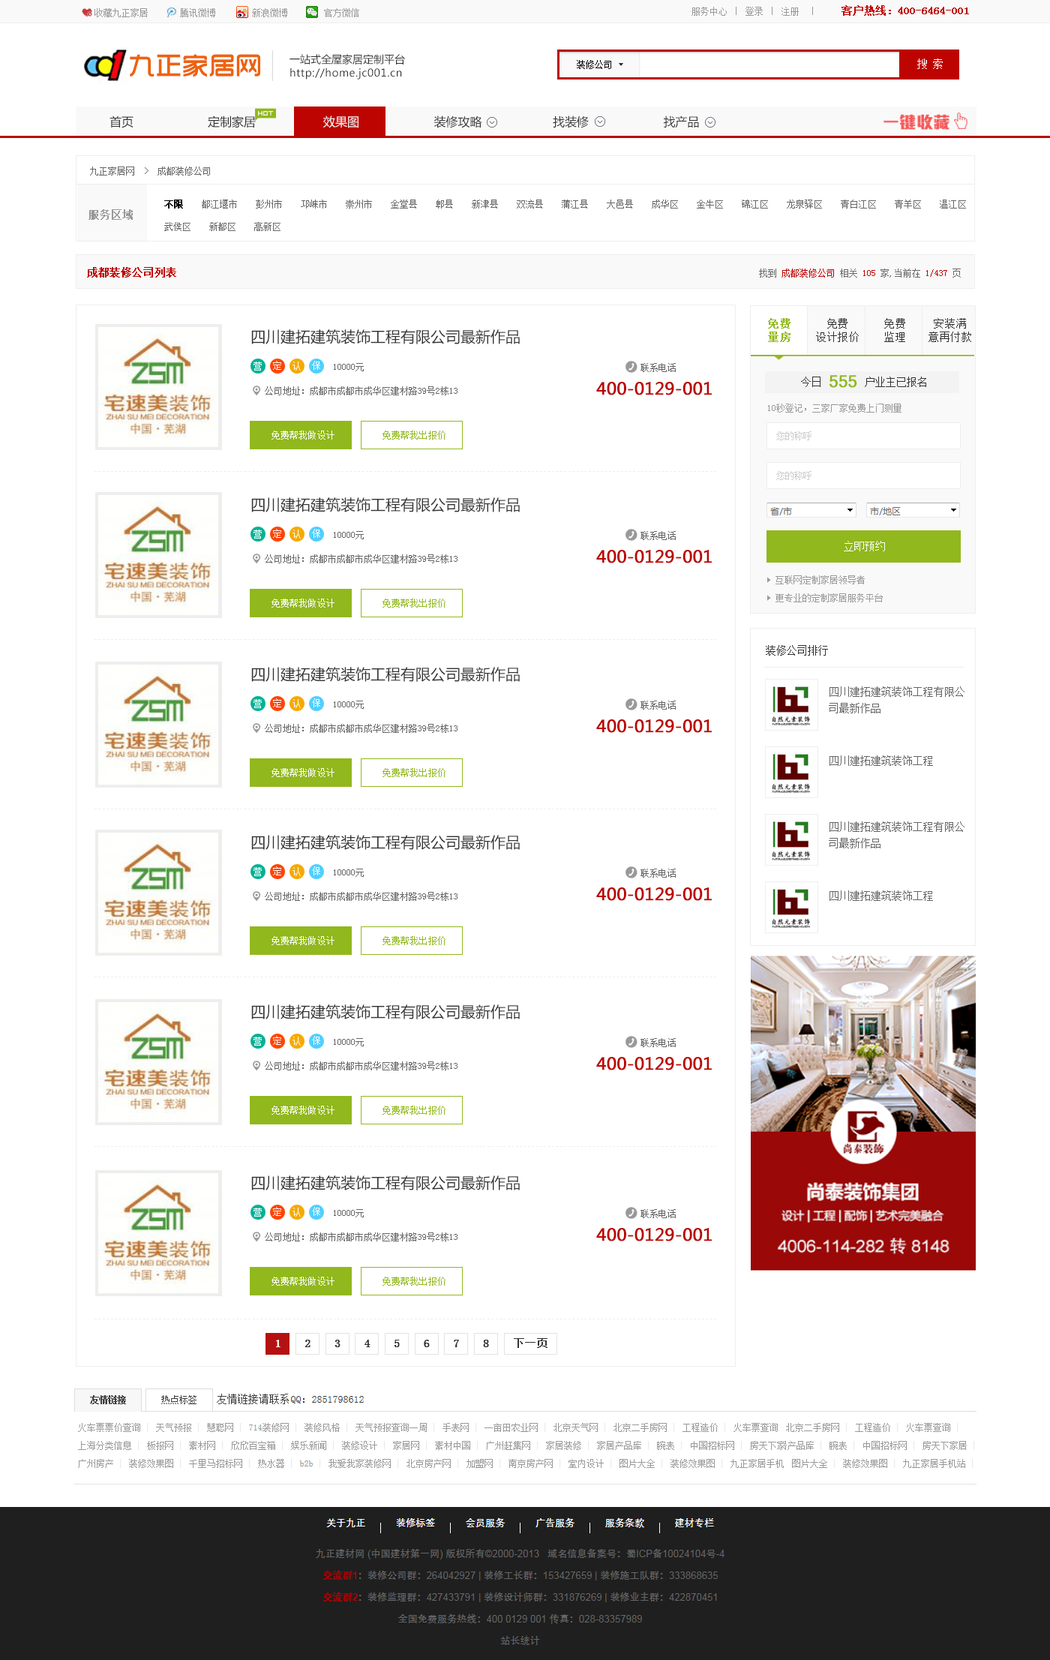
<style>
.page{position:relative;width:1050px;height:1660px;background:#ffffff}
.page>*{position:absolute;margin:0}
.t1{font:9px "NSimSun";color:#999999}
.t2{font:10.5px "NSimSun";color:#bd0400;font-weight:bold}
.t3{font:26px "TRENDS";color:#ee620d;font-weight:bold}
.t4{font:10.5px "MicrosoftYaHei";color:#333333}
.t5{font:9px "NSimSun";color:#000000}
.t6{font:10.5px "MicrosoftYaHei";letter-spacing:0.04em;color:#333333}
.t7{font:12px "MicrosoftYaHei";color:#333333}
.t8{font:12px "MicrosoftYaHei";color:#efefef}
.t9{font:9px "NSimSun";color:#666666}
.t10{font:10.5px "NSimSun";color:#999999;font-weight:bold}
.t11{font:9px/22.5px "NSimSun";color:#666666}
.t12{font:9px/22.5px "NSimSun";color:#000000;font-weight:bold}
.t13{font:9px "NSimSun";color:#bd0400}
.t14{font:10.5px/13.5px "NSimSun";letter-spacing:0.05em;color:#91b81d;font-weight:bold}
.t15{font:10.5px/13.5px "NSimSun";letter-spacing:0.05em;color:#333333}
.t16{font:15px "MicrosoftYaHei";color:#333333}
.t17{font:9px "NSimSun";letter-spacing:0.075em;color:#ffffff}
.t18{font:10.5px "NSimSun";color:#333333}
.t19{font:15.9px "Kartika";color:#91b81d;font-weight:bold}
.t20{font:16.5px "MicrosoftYaHei";color:#bc0500;font-weight:bold}
.t21{font:8.6px "NSimSun";letter-spacing:0.05em;color:#ffffff}
.t22{font:8.6px "NSimSun";letter-spacing:0.05em;color:#91b81d}
.t23{font:9px "NSimSun";color:#cccccc}
.t24{font:4.5px "NSimSun";letter-spacing:0.4em;color:#eeeeee;font-weight:bold}
.t25{font:10.5px "NSimSun";color:#ffffff}
.t26{font:9px/18px "NSimSun";color:#999999}
.t27{font:10.5px/16.5px "NSimSun";color:#666666}
.t28{font:10.5px "NSimSun";color:#666666}
</style>
<div class="page">
<p class="t1" style="left:692px;top:5px;width:277px;height:11px">服务中心 ｜ 登录 ｜ 注册  ｜     <span class="t2">客户热线：400-6464-001</span></p>
<p class="t1" style="left:94px;top:8px;width:265px;height:9px">收藏九正家居       腾讯微博        新浪微博        官方微信</p>
<p class="t3" style="left:130px;top:54px;width:130px;height:23px">九正家居网</p>
<p class="t4" style="left:290px;top:54px;width:115px;height:10px">一站式全屋家居定制平台</p>
<p class="t5" style="left:577px;top:60px;width:34px;height:9px">装修公司</p>
<p class="t6" style="left:290px;top:68px;width:112px;height:12px">http://home.jc001.cn</p>
<p class="t7" style="left:110px;top:116px;width:24px;height:12px">首页</p>
<p class="t7" style="left:208px;top:116px;width:491px;height:12px">定制家居                  <span class="t8"> 效果图</span>                     装修攻略                    找装修                     找产品</p>
<p class="t9" style="left:90px;top:166px;width:120px;height:10px">九正家居网  &gt;  成都装修公司</p>
<p class="t10" style="left:88px;top:209px;width:45px;height:11px">服务区域</p>
<p class="t11" style="left:164px;top:200px;width:802px;height:31px"><span class="t12">不限</span>    都江堰市    彭州市    邛崃市    崇州市    金堂县    郫县    新津县    双流县    蒲江县    大邑县    成华区    金牛区    锦江区    龙泉驿区    青白江区    青羊区    温江区<br>武侯区    新都区    高新区</p>
<p class="t2" style="left:87px;top:267px;width:89px;height:11px">成都装修公司列表</p>
<p class="t13" style="left:759px;top:268px;width:202px;height:10px"><span class="t9">找到 </span>成都装修公司<span class="t9"> 相关 </span>105<span class="t9"> 家,当前在 </span>1/437<span class="t9"> 页</span></p>
<p class="t14" style="left:768px;top:318px;width:22px;height:24px">免费<br>量房</p>
<p class="t15" style="left:816px;top:318px;width:43px;height:24px;text-align:center">免费<br>设计报价</p>
<p class="t15" style="left:884px;top:318px;width:21px;height:24px">免费<br>监理</p>
<p class="t15" style="left:928px;top:318px;width:43px;height:24px;text-align:center">安装满<br>意再付款</p>
<p class="t16" style="left:251px;top:329px;width:269px;height:15px">四川建拓建筑装饰工程有限公司最新作品</p>
<p class="t17" style="left:254px;top:362px;width:8px;height:8px">营</p>
<p class="t17" style="left:273px;top:361px;width:8px;height:9px">定</p>
<p class="t17" style="left:292px;top:362px;width:9px;height:8px">认</p>
<p class="t17" style="left:312px;top:361px;width:8px;height:9px">保</p>
<p class="t9" style="left:334px;top:363px;width:30px;height:8px">10000元</p>
<p class="t9" style="left:640px;top:363px;width:36px;height:9px">联系电话</p>
<p class="t18" style="left:801px;top:376px;width:125px;height:11px">今日       户业主已报名</p>
<p class="t19" style="left:830px;top:375px;width:27px;height:13px">555</p>
<p class="t9" style="left:265px;top:386px;width:193px;height:9px">公司地址：成都市成都市成华区建材路39号2栋13</p>
<p class="t20" style="left:596px;top:382px;width:116px;height:13px">400-0129-001</p>
<p class="t1" style="left:768px;top:404px;width:134px;height:8px">10秒登记，三家厂家免费上门测量</p>
<p class="t21" style="left:272px;top:430px;width:62px;height:10px">免费帮我做设计</p>
<p class="t22" style="left:382px;top:430px;width:64px;height:10px">免费帮我出报价</p>
<p class="t23" style="left:776px;top:431px;width:36px;height:9px">您的称呼</p>
<p class="t24" style="left:94px;top:471px;width:622px;height:1px">----------------------------------------------------------------------------------------------------------------------------------------------------------</p>
<p class="t23" style="left:776px;top:471px;width:36px;height:9px">您的称呼</p>
<p class="t16" style="left:251px;top:497px;width:269px;height:15px">四川建拓建筑装饰工程有限公司最新作品</p>
<p class="t17" style="left:254px;top:530px;width:8px;height:8px">营</p>
<p class="t17" style="left:273px;top:529px;width:8px;height:9px">定</p>
<p class="t17" style="left:292px;top:530px;width:9px;height:8px">认</p>
<p class="t17" style="left:312px;top:529px;width:8px;height:9px">保</p>
<p class="t9" style="left:334px;top:531px;width:30px;height:8px">10000元</p>
<p class="t9" style="left:640px;top:531px;width:36px;height:9px">联系电话</p>
<p class="t25" style="left:844px;top:541px;width:41px;height:10px">立即预约</p>
<p class="t9" style="left:265px;top:554px;width:193px;height:9px">公司地址：成都市成都市成华区建材路39号2栋13</p>
<p class="t20" style="left:596px;top:550px;width:116px;height:13px">400-0129-001</p>
<p class="t26" style="left:776px;top:575px;width:107px;height:27px">互联网定制家居领导者<br>更专业的定制家居服务平台</p>
<p class="t21" style="left:272px;top:598px;width:62px;height:10px">免费帮我做设计</p>
<p class="t22" style="left:382px;top:598px;width:64px;height:10px">免费帮我出报价</p>
<p class="t24" style="left:94px;top:639px;width:622px;height:1px">----------------------------------------------------------------------------------------------------------------------------------------------------------</p>
<p class="t18" style="left:766px;top:645px;width:62px;height:11px">装修公司排行</p>
<p class="t16" style="left:251px;top:667px;width:269px;height:15px">四川建拓建筑装饰工程有限公司最新作品</p>
<p class="t27" style="left:829px;top:686px;width:135px;height:27px">四川建拓建筑装饰工程有限公<br>司最新作品</p>
<p class="t17" style="left:254px;top:699px;width:8px;height:9px">营</p>
<p class="t17" style="left:273px;top:698px;width:8px;height:9px">定</p>
<p class="t17" style="left:292px;top:699px;width:9px;height:9px">认</p>
<p class="t17" style="left:312px;top:698px;width:8px;height:9px">保</p>
<p class="t9" style="left:334px;top:700px;width:30px;height:9px">10000元</p>
<p class="t9" style="left:640px;top:700px;width:36px;height:10px">联系电话</p>
<p class="t9" style="left:265px;top:724px;width:193px;height:9px">公司地址：成都市成都市成华区建材路39号2栋13</p>
<p class="t20" style="left:596px;top:719px;width:116px;height:14px">400-0129-001</p>
<p class="t28" style="left:830px;top:755px;width:103px;height:11px">四川建拓建筑装饰工程</p>
<p class="t21" style="left:272px;top:768px;width:62px;height:9px">免费帮我做设计</p>
<p class="t22" style="left:382px;top:768px;width:64px;height:9px">免费帮我出报价</p>
<p class="t24" style="left:94px;top:808px;width:622px;height:1px">----------------------------------------------------------------------------------------------------------------------------------------------------------</p>
<p class="t27" style="left:829px;top:821px;width:135px;height:27px">四川建拓建筑装饰工程有限公<br>司最新作品</p>
<p class="t16" style="left:251px;top:835px;width:269px;height:15px">四川建拓建筑装饰工程有限公司最新作品</p>
<p class="t17" style="left:254px;top:867px;width:8px;height:9px">营</p>
<p class="t17" style="left:273px;top:866px;width:8px;height:9px">定</p>
<p class="t17" style="left:292px;top:867px;width:9px;height:9px">认</p>
<p class="t17" style="left:312px;top:866px;width:8px;height:9px">保</p>
<p class="t9" style="left:334px;top:868px;width:30px;height:9px">10000元</p>
<p class="t9" style="left:640px;top:868px;width:36px;height:10px">联系电话</p>
<p class="t9" style="left:265px;top:892px;width:193px;height:9px">公司地址：成都市成都市成华区建材路39号2栋13</p>
<p class="t20" style="left:596px;top:887px;width:116px;height:14px">400-0129-001</p>
<p class="t28" style="left:830px;top:890px;width:103px;height:11px">四川建拓建筑装饰工程</p>
<p class="t21" style="left:272px;top:936px;width:62px;height:9px">免费帮我做设计</p>
<p class="t22" style="left:382px;top:936px;width:64px;height:9px">免费帮我出报价</p>
<p class="t24" style="left:94px;top:976px;width:622px;height:1px">----------------------------------------------------------------------------------------------------------------------------------------------------------</p>
<p class="t16" style="left:251px;top:1004px;width:269px;height:15px">四川建拓建筑装饰工程有限公司最新作品</p>
<p class="t17" style="left:254px;top:1036px;width:8px;height:10px">营</p>
<p class="t17" style="left:273px;top:1036px;width:8px;height:9px">定</p>
<p class="t17" style="left:292px;top:1036px;width:9px;height:10px">认</p>
<p class="t17" style="left:312px;top:1036px;width:8px;height:9px">保</p>
<p class="t9" style="left:334px;top:1038px;width:30px;height:8px">10000元</p>
<p class="t9" style="left:640px;top:1038px;width:36px;height:9px">联系电话</p>
<p class="t9" style="left:265px;top:1061px;width:193px;height:9px">公司地址：成都市成都市成华区建材路39号2栋13</p>
<p class="t20" style="left:596px;top:1057px;width:116px;height:13px">400-0129-001</p>
<p class="t21" style="left:272px;top:1106px;width:62px;height:8px">免费帮我做设计</p>
<p class="t22" style="left:382px;top:1106px;width:64px;height:8px">免费帮我出报价</p>
<p class="t24" style="left:94px;top:1146px;width:622px;height:1px">----------------------------------------------------------------------------------------------------------------------------------------------------------</p>
<p class="t16" style="left:251px;top:1175px;width:269px;height:15px">四川建拓建筑装饰工程有限公司最新作品</p>
<p class="t17" style="left:254px;top:1208px;width:8px;height:8px">营</p>
<p class="t17" style="left:273px;top:1207px;width:8px;height:9px">定</p>
<p class="t17" style="left:292px;top:1208px;width:9px;height:8px">认</p>
<p class="t17" style="left:312px;top:1207px;width:8px;height:9px">保</p>
<p class="t9" style="left:334px;top:1209px;width:30px;height:8px">10000元</p>
<p class="t9" style="left:640px;top:1209px;width:36px;height:9px">联系电话</p>
<p class="t20" style="left:596px;top:1228px;width:116px;height:13px">400-0129-001</p>
<p class="t9" style="left:265px;top:1232px;width:193px;height:9px">公司地址：成都市成都市成华区建材路39号2栋13</p>
<p class="t21" style="left:272px;top:1276px;width:62px;height:10px">免费帮我做设计</p>
<p class="t22" style="left:382px;top:1276px;width:64px;height:10px">免费帮我出报价</p>
<p class="t24" style="left:94px;top:1318px;width:622px;height:1px">----------------------------------------------------------------------------------------------------------------------------------------------------------</p>
</div>
